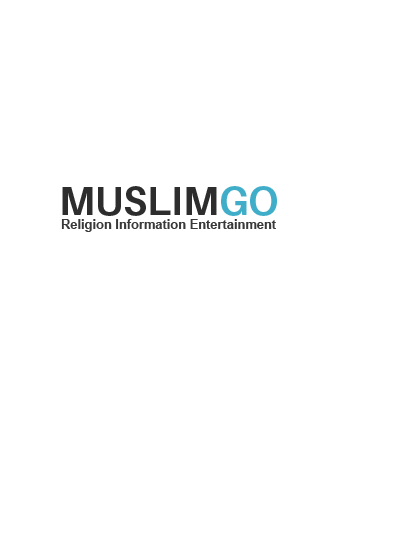
<style>
.page{position:relative;width:413px;height:550px;background:#ffffff}
.page>*{position:absolute;margin:0}
.t1{font:40px "Aileron-Bold";color:#2d2d2d;text-transform:uppercase}
.t2{font:40px "Aileron-Bold";color:#41aec9;text-transform:uppercase}
.t3{font:13px "Arial-BoldMT";color:#393939}
</style>
<div class="page">
<p class="t1" style="left:62px;top:186px;width:215px;height:30px">Muslim<span class="t2">Go</span></p>
<p class="t3" style="left:61px;top:219px;width:215px;height:13px">Religion Information Entertainment</p>
</div>
